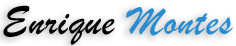
<style>
.page{position:relative;width:236px;height:46px;background:#ffffff}
.page>*{position:absolute;margin:0}
.t1{font:41.7px "BrushScriptMT";letter-spacing:0.025em;color:#020202}
.t2{font:41.7px "BrushScriptMT";letter-spacing:0.025em;color:#278dd0}
</style>
<div class="page">
<p class="t1" style="left:3px;top:5px;width:230px;height:40px">Enrique<span class="t2"> Montes</span></p>
</div>
